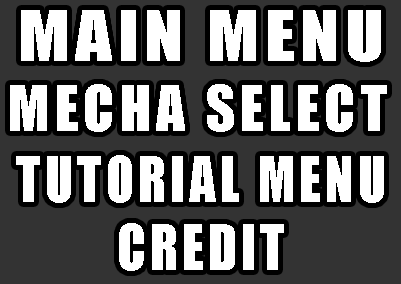
<style>
.page{position:relative;width:401px;height:284px;background:#333333}
.page>*{position:absolute;margin:0}
.t1{font:64.8px "Impact";letter-spacing:0.08em;color:#ffffff;scale:1.11 1}
.t2{font:58px "Impact";letter-spacing:0.08em;color:#ffffff}
.t3{font:58px "Impact";letter-spacing:0.08em;color:#ffffff;scale:0.9 1}
</style>
<div class="page">
<p class="t1" style="left:21px;top:10px;width:360px;height:52px">MAIN MENU</p>
<p class="t2" style="left:10px;top:84px;width:377px;height:48px">MECHA SELECT</p>
<p class="t3" style="left:16px;top:155px;width:368px;height:48px">TUTORIAL MENU</p>
<p class="t3" style="left:119px;top:223px;width:165px;height:48px">CREDIT</p>
</div>
